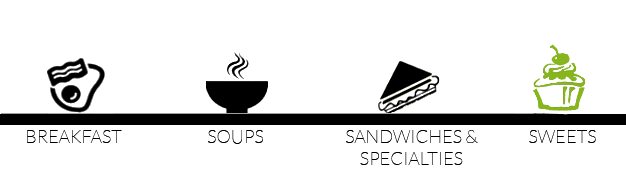
<style>
.page{position:relative;width:626px;height:175px;background:#ffffff}
.page>*{position:absolute;margin:0}
.t1{font:18px "Lato-Hairline";color:#000000}
</style>
<div class="page">
<p class="t1" style="left:27px;top:130px;width:95px;height:13px">BREAKFAST</p>
<p class="t1" style="left:208px;top:130px;width:55px;height:14px">SOUPS</p>
<p class="t1" style="left:346px;top:130px;width:132px;height:35px;text-align:center">SANDWICHES &amp;<br>SPECIALTIES</p>
<p class="t1" style="left:529px;top:130px;width:67px;height:13px">SWEETS</p>
</div>
